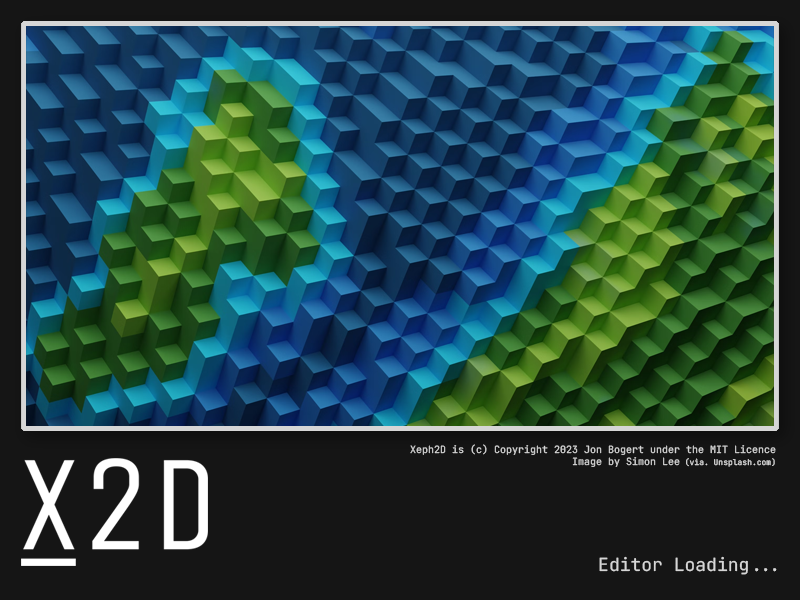
<style>
.page{position:relative;width:800px;height:600px;background:#151515}
.page>*{position:absolute;margin:0}
.t1{font:10px/12px "JetBrainsMono-Regular";color:#d6d6d6}
.t2{font:8px/12px "JetBrainsMono-Regular";color:#d6d6d6}
.t3{font:18px "JetBrainsMono-Regular";color:#d6d6d6}
</style>
<div class="page">
<p class="t1" style="left:410px;top:444px;width:366px;height:23px;text-align:right">Xeph2D is (c) Copyright 2023 Jon Bogert under the MIT Licence<br>Image by Simon Lee<span class="t2"> (via. Unsplash.com)</span></p>
<p class="t3" style="left:599px;top:556px;width:178px;height:19px">Editor Loading...</p>
</div>
